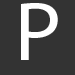
<style>
.page{position:relative;width:75px;height:75px;background:#333333}
.page>*{position:absolute;margin:0}
.t1{font:84.2px "MyriadPro-Regular";color:#ffffff;scale:1.05 1}
</style>
<div class="page">
<p class="t1" style="left:21px;top:3px;width:37px;height:57px">P</p>
</div>
